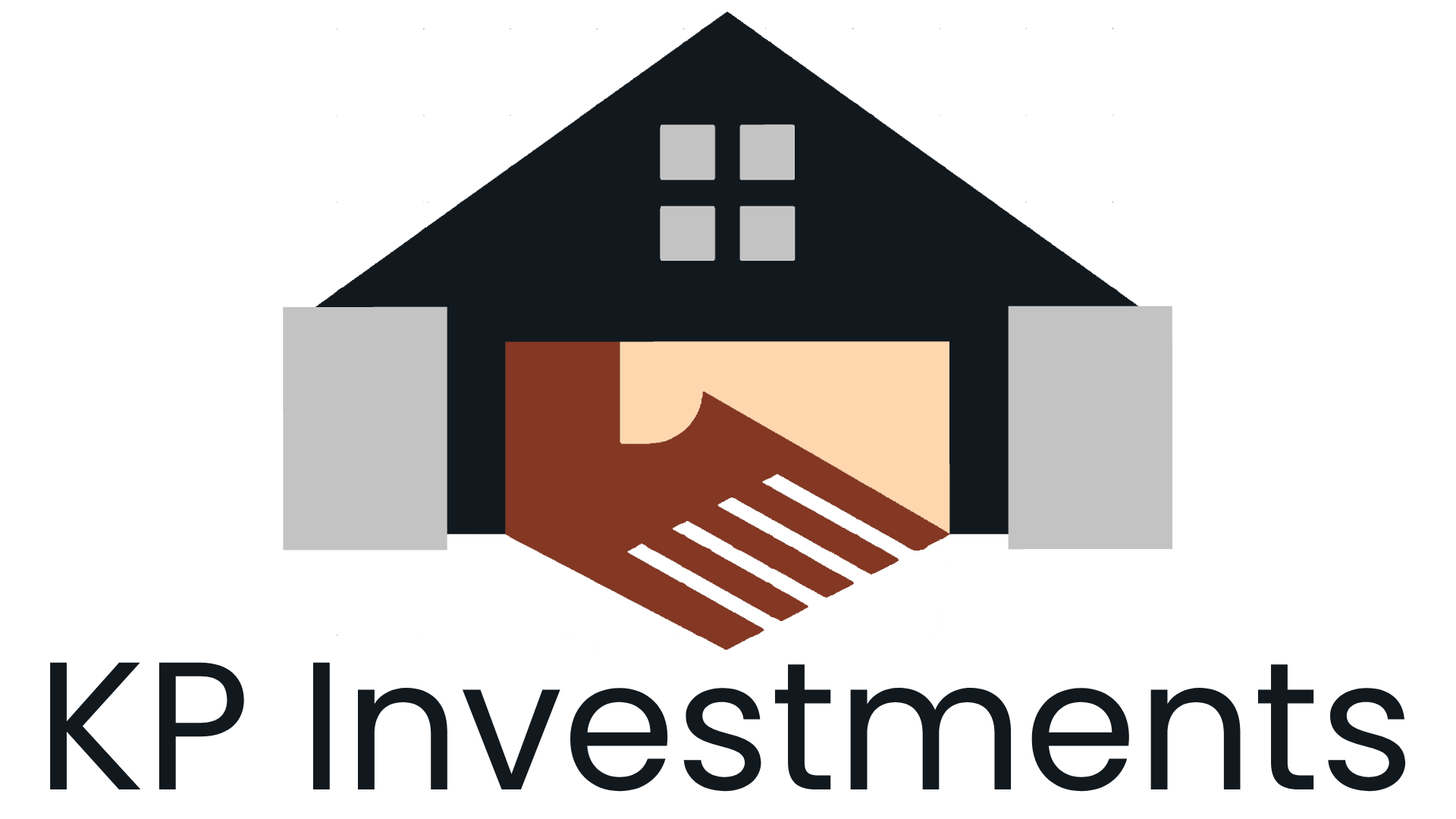
<style>
.page{position:relative;width:1456px;height:819px;background:#ffffff}
.page>*{position:absolute;margin:0}
.t1{font:182px "Poppins-Regular";color:#11191f}
</style>
<div class="page">
<p class="t1" style="left:50px;top:662px;width:1356px;height:130px">KP Investments</p>
</div>
